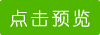
<style>
.page{position:relative;width:100px;height:35px;background:#51b600}
.page>*{position:absolute;margin:0}
.t1{font:18px "YouYuan";letter-spacing:0.2em;color:#ffffff;font-weight:bold}
</style>
<div class="page">
<p class="t1" style="left:10px;top:9px;width:80px;height:18px">点击预览</p>
</div>
